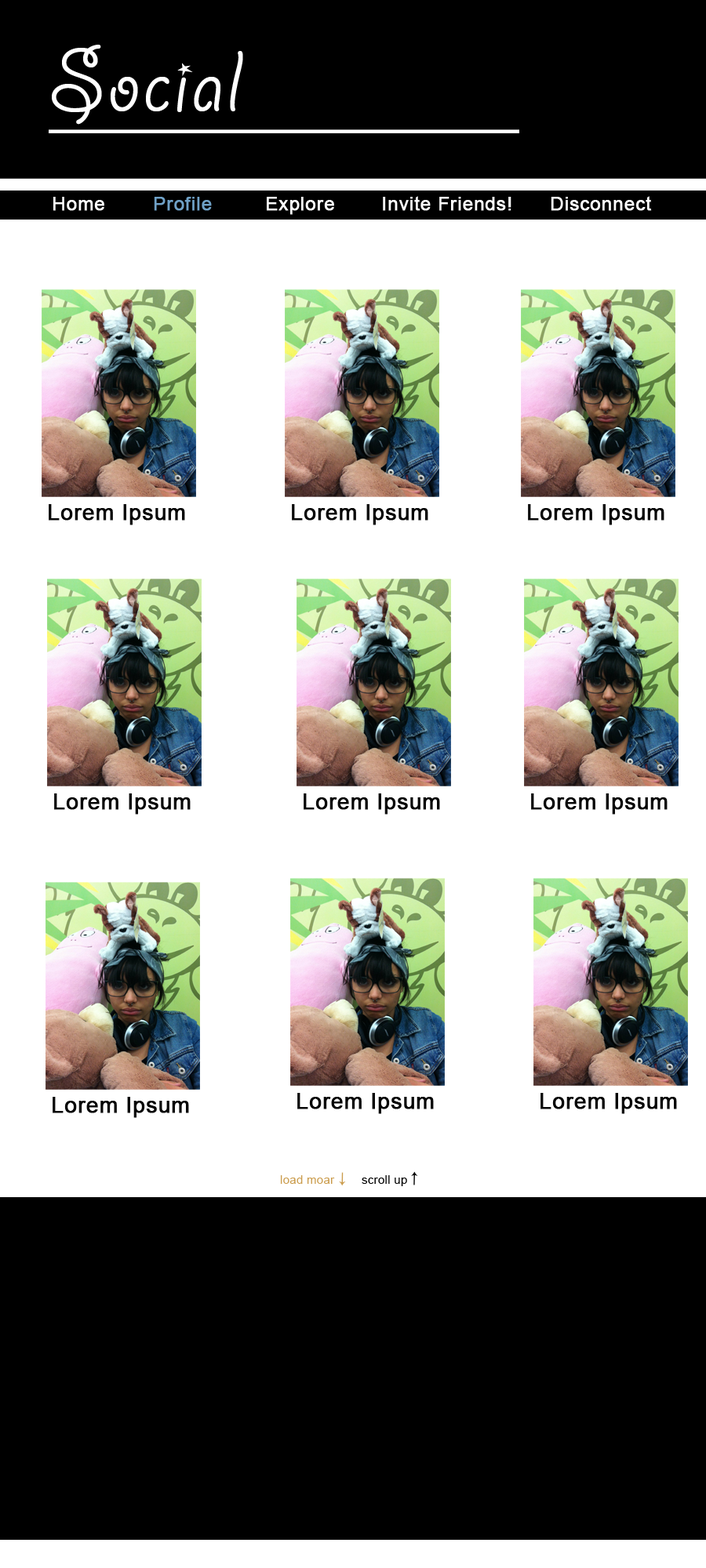
<style>
.page{position:relative;width:706px;height:1568px;background:#ffffff}
.page>*{position:absolute;margin:0}
.t1{font:97.2px "GiddyupStd";letter-spacing:0.02em;color:#ffffff}
.t2{font:18.8px "ArialMT";letter-spacing:0.02em;color:#ffffff;font-weight:bold}
.t3{font:18.8px "ArialMT";letter-spacing:0.02em;color:#6fa1c7;font-weight:bold}
.t4{font:22px "ArialMT";letter-spacing:0.02em;color:#050505;font-weight:bold}
.t5{font:11.8px "ArialMT";letter-spacing:0.02em;color:#cb9d4e}
.t6{font:11.8px "ArialMT";letter-spacing:0.02em;color:#000000}
</style>
<div class="page">
<p class="t1" style="left:52px;top:45px;width:191px;height:80px">Social</p>
<p class="t2" style="left:53px;top:197px;width:51px;height:14px">Home</p>
<p class="t3" style="left:154px;top:197px;width:58px;height:14px">Profile</p>
<p class="t2" style="left:267px;top:197px;width:67px;height:18px">Explore</p>
<p class="t2" style="left:383px;top:196px;width:128px;height:15px">Invite Friends!</p>
<p class="t2" style="left:550px;top:196px;width:102px;height:15px">Disconnect</p>
<p class="t4" style="left:49px;top:504px;width:136px;height:21px">Lorem Ipsum</p>
<p class="t4" style="left:292px;top:504px;width:136px;height:21px">Lorem Ipsum</p>
<p class="t4" style="left:528px;top:504px;width:136px;height:21px">Lorem Ipsum</p>
<p class="t4" style="left:54px;top:793px;width:137px;height:22px">Lorem Ipsum</p>
<p class="t4" style="left:303px;top:793px;width:137px;height:22px">Lorem Ipsum</p>
<p class="t4" style="left:531px;top:793px;width:136px;height:22px">Lorem Ipsum</p>
<p class="t4" style="left:53px;top:1097px;width:136px;height:21px">Lorem Ipsum</p>
<p class="t4" style="left:297px;top:1093px;width:137px;height:21px">Lorem Ipsum</p>
<p class="t4" style="left:540px;top:1093px;width:137px;height:21px">Lorem Ipsum</p>
<p class="t5" style="left:280px;top:1175px;width:55px;height:9px">load moar</p>
<p class="t6" style="left:361px;top:1175px;width:46px;height:11px">scroll up</p>
</div>
